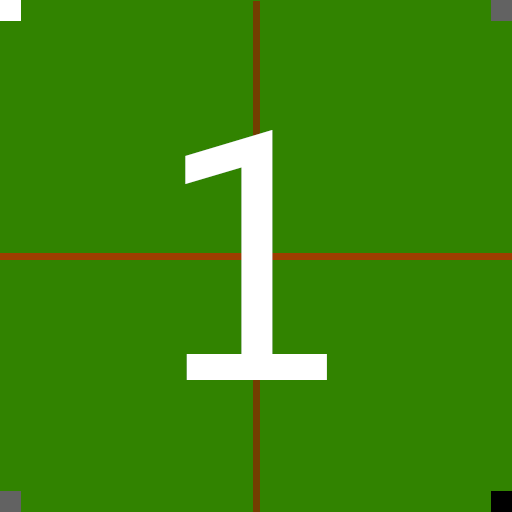
<style>
.page{position:relative;width:512px;height:512px;background:#318300}
.page>*{position:absolute;margin:0}
.t1{font:323.1px "MicrosoftYaHei";color:#ffffff}
</style>
<div class="page">
<p class="t1" style="left:185px;top:130px;width:142px;height:250px">1</p>
</div>
